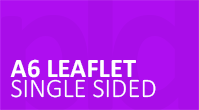
<style>
.page{position:relative;width:199px;height:110px;background:#a80de8}
.page>*{position:absolute;margin:0}
.t1{font:26.6px "Calibri-Bold";color:#ffffff}
.t2{font:26.6px "Calibri-Light";color:#ffffff}
</style>
<div class="page">
<p class="t1" style="left:10px;top:59px;width:126px;height:19px">A6 LEAFLET</p>
<p class="t2" style="left:11px;top:79px;width:145px;height:19px">SINGLE SIDED</p>
</div>
